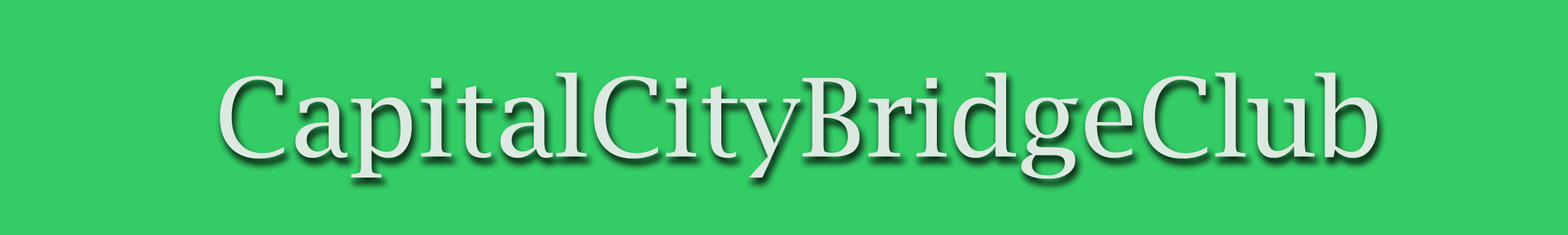
<style>
.page{position:relative;width:1568px;height:235px;background:#33cc66}
.page>*{position:absolute;margin:0}
.t1{font:108.9px "LucidaBright";color:#dce9e0}
</style>
<div class="page">
<p class="t1" style="left:220px;top:73px;width:1157px;height:106px">CapitalCityBridgeClub</p>
</div>
